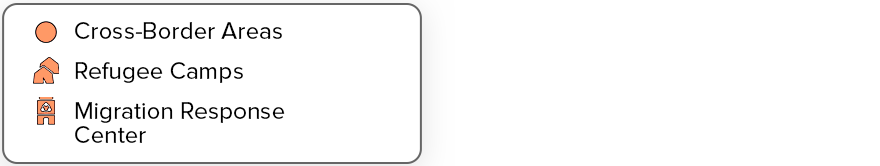
<style>
.page{position:relative;width:880px;height:166px;background:#ffffff}
.page>*{position:absolute;margin:0}
.t1{font:24.3px "ProximaNova-Regular";color:#000000}
</style>
<div class="page">
<p class="t1" style="left:75px;top:22px;width:207px;height:17px">Cross-Border Areas</p>
<p class="t1" style="left:75px;top:62px;width:168px;height:21px">Refugee Camps</p>
<p class="t1" style="left:75px;top:102px;width:210px;height:41px">Migration Response Center</p>
</div>
